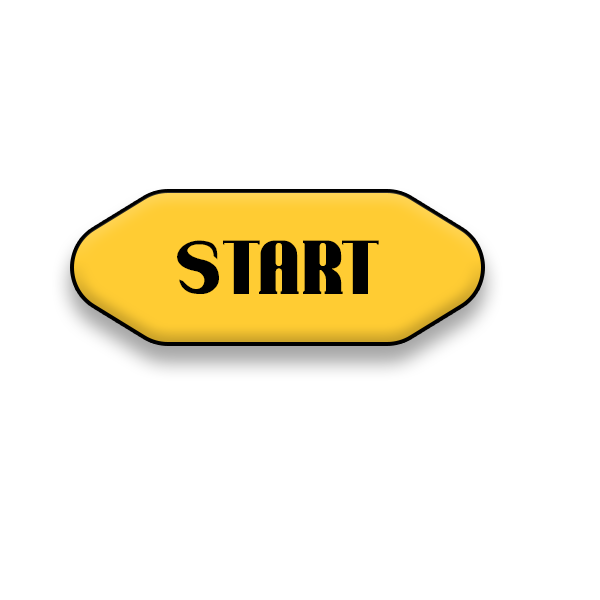
<style>
.page{position:relative;width:600px;height:600px;background:#ffffff}
.page>*{position:absolute;margin:0}
.t1{font:83.3px "warriot";color:#000000}
</style>
<div class="page">
<p class="t1" style="left:177px;top:240px;width:202px;height:54px">START</p>
</div>
